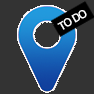
<style>
.page{position:relative;width:94px;height:94px;background:#333333}
.page>*{position:absolute;margin:0}
.t1{font:11px "Helvetica-Bold";letter-spacing:-0.075em;color:#ffffff;text-transform:uppercase}
</style>
<div class="page">
<p class="t1" style="left:57px;top:10px;width:30px;height:20px;rotate:-30deg">TO DO</p>
</div>
